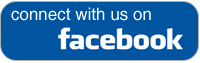
<style>
.page{position:relative;width:200px;height:63px;background:#0154a0}
.page>*{position:absolute;margin:0}
.t1{font:17px "Helvetica";color:#ffffff}
</style>
<div class="page">
<p class="t1" style="left:11px;top:7px;width:140px;height:14px">connect with us on</p>
</div>
